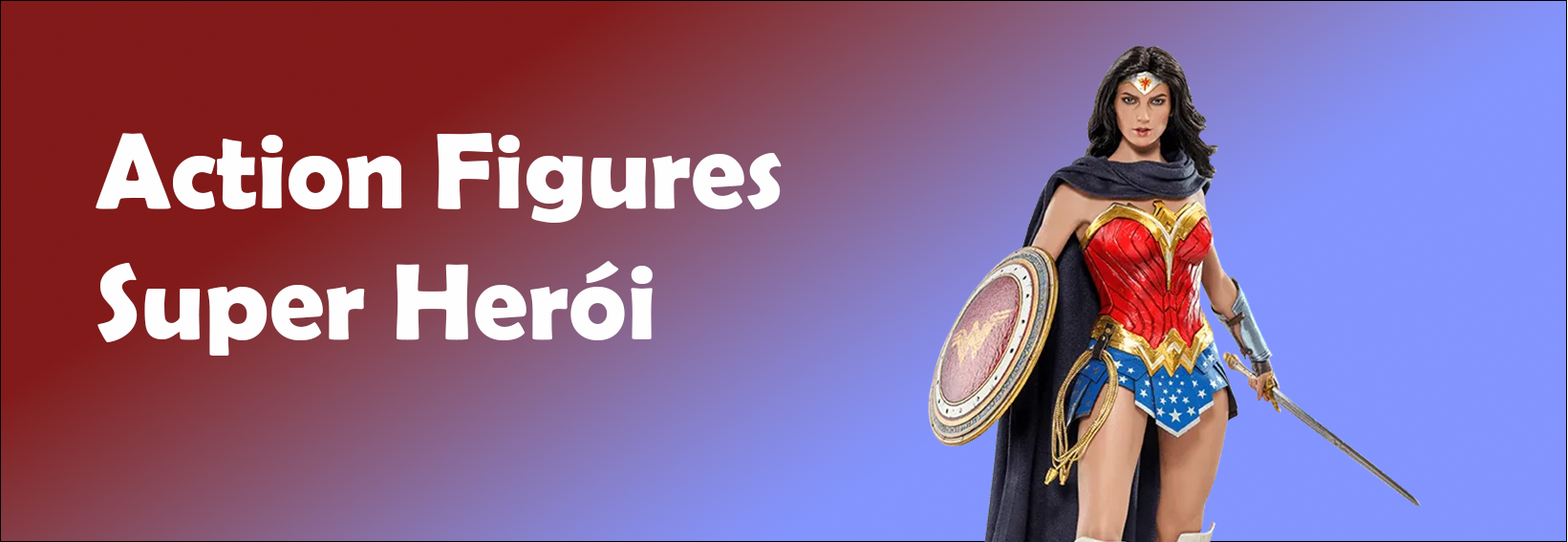
<style>
.page{position:relative;width:1568px;height:542px}
.page>*{position:absolute;margin:0}
.t1{font:108.7px "BerlinSansFBDemi-Bold";color:#fefefe}
</style>
<div class="page">
<p class="t1" style="left:96px;top:133px;width:686px;height:222px">Action Figures<br>Super Herói</p>
</div>
